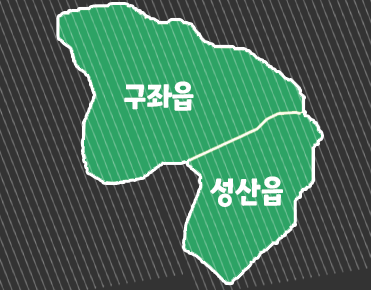
<style>
.page{position:relative;width:371px;height:290px;background:#333333}
.page>*{position:absolute;margin:0}
.t1{font:30.5px "ONEMobilePOPRegular";color:#ffffff;scale:0.93 1}
</style>
<div class="page">
<p class="t1" style="left:124px;top:81px;width:70px;height:30px">구좌읍</p>
<p class="t1" style="left:210px;top:176px;width:73px;height:31px">성산읍</p>
</div>
